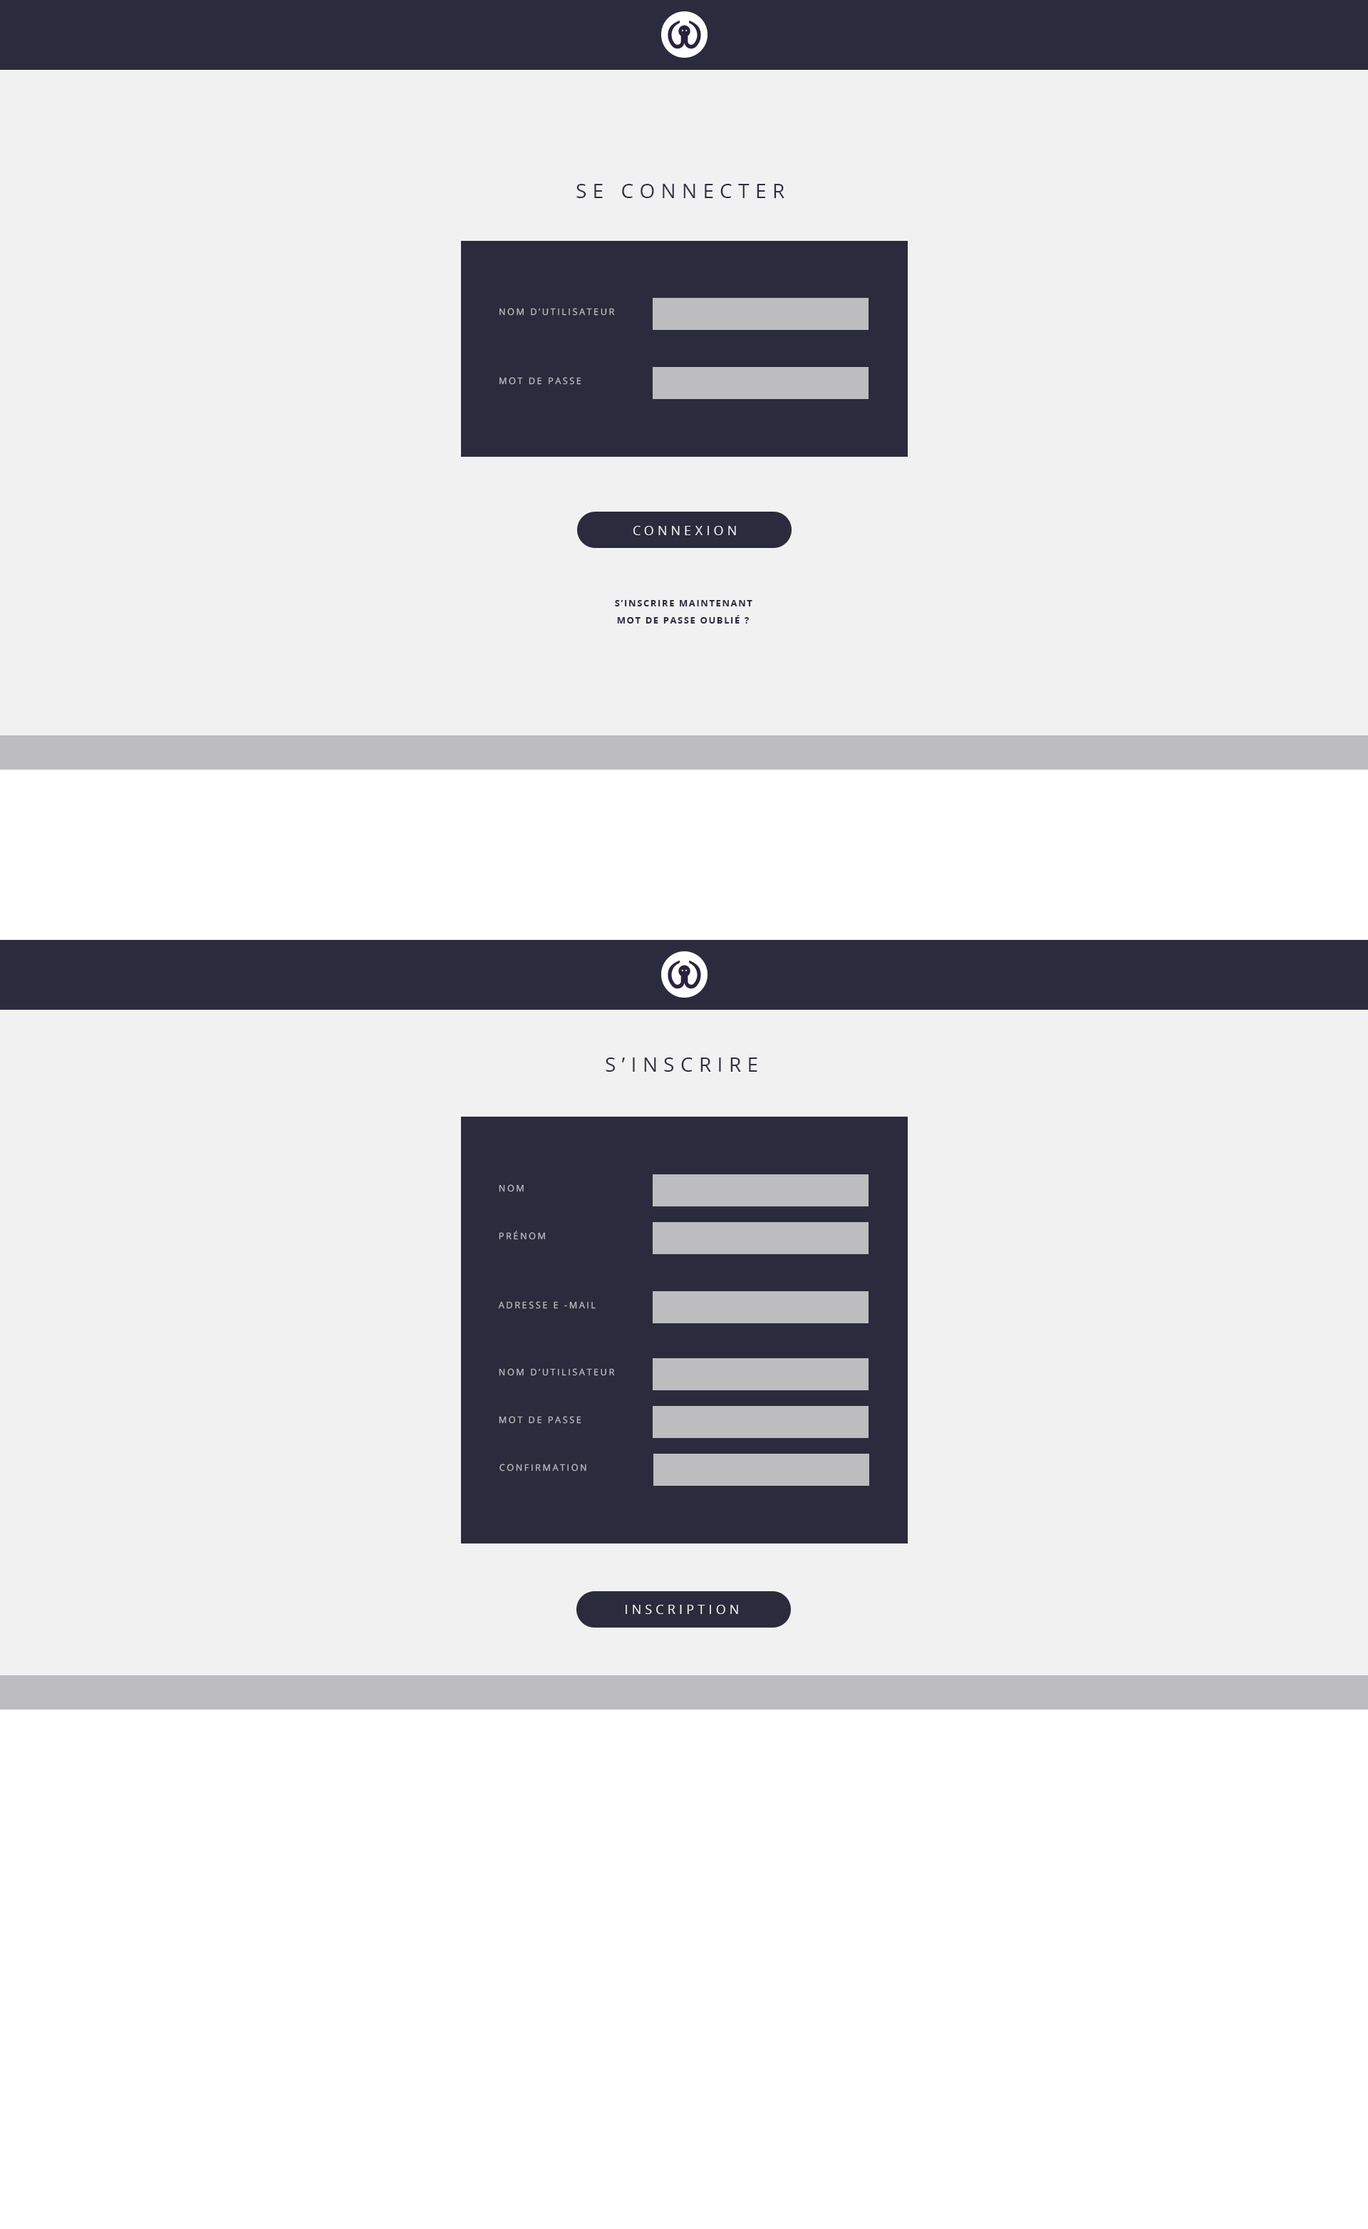
<style>
.page{position:relative;width:1368px;height:2229px;background:#f1f1f1}
.page>*{position:absolute;margin:0}
.t1{font:19.9px "OpenSans";letter-spacing:0.3em;color:#312f3e;text-transform:uppercase}
.t2{font:9px "OpenSans";letter-spacing:0.2em;color:#bdbdc0;text-transform:uppercase}
.t3{font:12.7px "OpenSans";letter-spacing:0.3em;color:#f1f1f1;text-transform:uppercase}
.t4{font:9.1px "OpenSans-Bold";letter-spacing:0.14em;color:#2b2b3d;text-transform:uppercase}
</style>
<div class="page">
<p class="t1" style="left:577px;top:184px;width:208px;height:14px">se connecter</p>
<p class="t2" style="left:500px;top:308px;width:115px;height:8px">nom d’utilisateur</p>
<p class="t2" style="left:500px;top:377px;width:81px;height:8px">mot de passe</p>
<p class="t3" style="left:634px;top:526px;width:102px;height:9px">connexion</p>
<p class="t4" style="left:615px;top:600px;width:138px;height:6px">s’inscrire maintenant</p>
<p class="t4" style="left:617px;top:615px;width:132px;height:9px">mot de passe oublié ?</p>
<p class="t1" style="left:606px;top:1058px;width:152px;height:14px">s’inscrire</p>
<p class="t2" style="left:499px;top:1184px;width:25px;height:8px">nom</p>
<p class="t2" style="left:499px;top:1231px;width:46px;height:9px">prénom</p>
<p class="t2" style="left:498px;top:1301px;width:98px;height:8px">adresse e -mail</p>
<p class="t2" style="left:499px;top:1368px;width:116px;height:8px">nom d’utilisateur</p>
<p class="t2" style="left:499px;top:1416px;width:82px;height:8px">mot de passe</p>
<p class="t2" style="left:500px;top:1464px;width:86px;height:8px">confirmation</p>
<p class="t3" style="left:626px;top:1605px;width:112px;height:9px">inscription</p>
</div>
